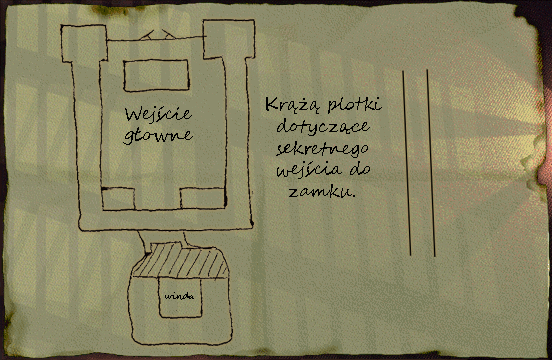
<style>
.page{position:relative;width:552px;height:360px;background:#8c8c6c}
.page>*{position:absolute;margin:0}
.t1{font:18px "SegoeScript";color:#000000}
.t2{font:9px "SegoeScript";color:#000000}
</style>
<div class="page">
<p class="t1" style="left:266px;top:97px;width:116px;height:101px;text-align:center">Krążą plotki dotyczące sekretnego wejścia do zamku.</p>
<p class="t1" style="left:123px;top:106px;width:70px;height:39px;text-align:center">Wejście <br>głowne</p>
<p class="t2" style="left:165px;top:292px;width:29px;height:8px">winda</p>
</div>
